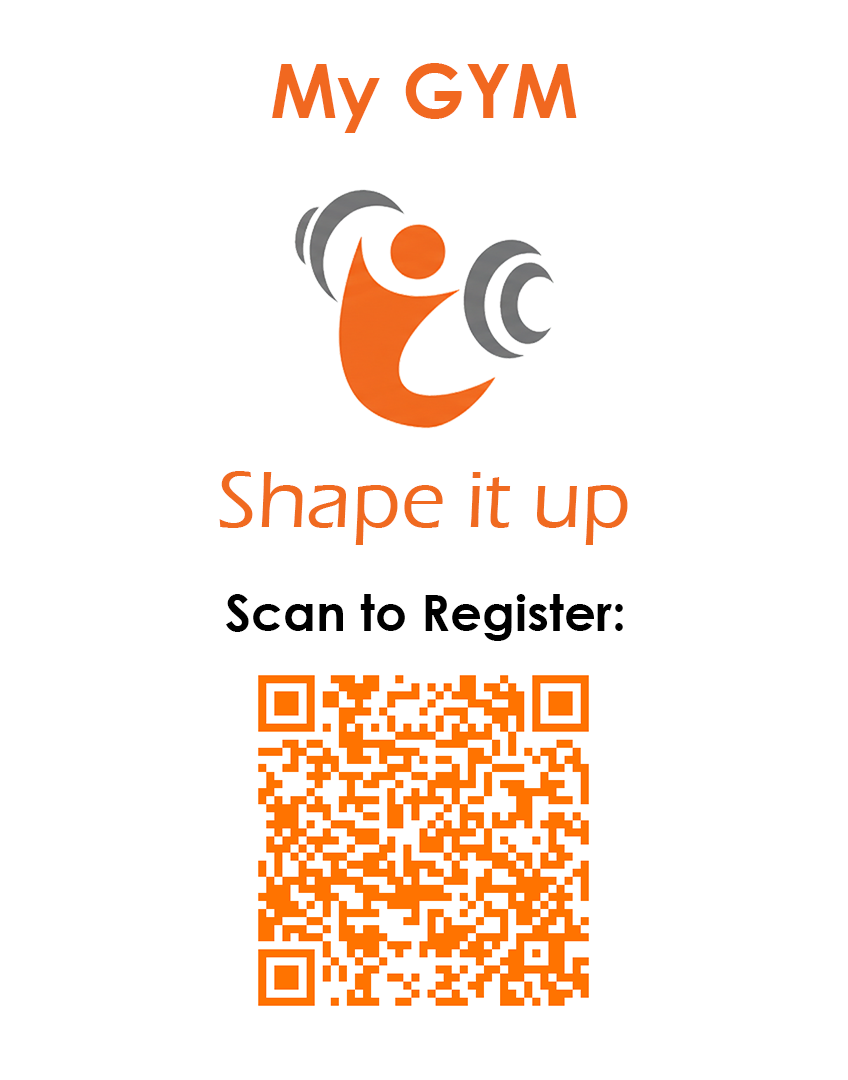
<style>
.page{position:relative;width:848px;height:1080px;background:#ffffff}
.page>*{position:absolute;margin:0}
.t1{font:75px "CenturyGothic-Bold";color:#f16820}
.t2{font:83.3px "ErasITC-Medium";color:#f06a20}
.t3{font:50px "CenturyGothic-Bold";color:#000000}
</style>
<div class="page">
<p class="t1" style="left:272px;top:63px;width:305px;height:70px">My GYM</p>
<p class="t2" style="left:219px;top:471px;width:409px;height:74px">Shape it up</p>
<p class="t3" style="left:226px;top:594px;width:397px;height:47px">Scan to Register:</p>
</div>
